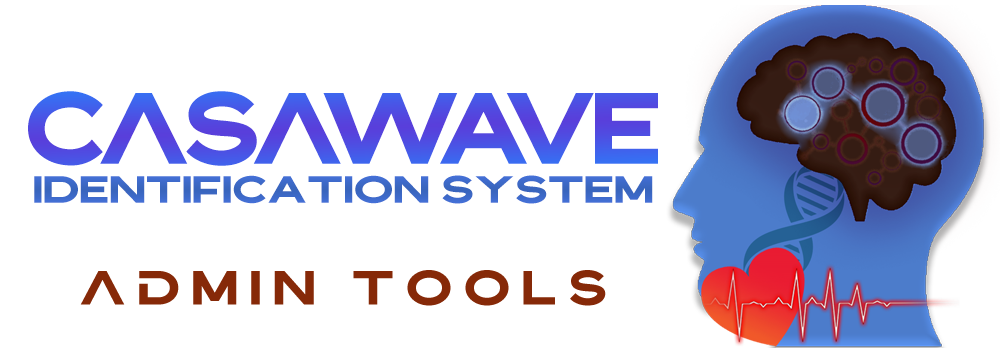
<style>
.page{position:relative;width:1000px;height:350px;background:#ffffff}
.page>*{position:absolute;margin:0}
.t1{font:88.9px "Bristone";letter-spacing:-0.08em;color:#4d4fe3}
.t2{font:33.3px "Bristone";letter-spacing:-0.02em;color:#3d69c8;scale:1.14 1}
.t3{font:42.2px "Bristone";letter-spacing:0.24em;color:#862908;scale:1.05 1}
</style>
<div class="page">
<p class="t1" style="left:28px;top:91px;width:630px;height:75px">CaSaWAVE</p>
<p class="t2" style="left:34px;top:175px;width:619px;height:29px">IDENTIFICATION SYSTEM</p>
<p class="t3" style="left:80px;top:270px;width:526px;height:36px">admin tools</p>
</div>
